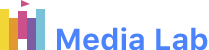
<style>
.page{position:relative;width:209px;height:50px;background:#ffffff}
.page>*{position:absolute;margin:0}
.t1{font:30px "SFUIText-Bold";color:#4a83fb}
</style>
<div class="page">
<p class="t1" style="left:57px;top:27px;width:151px;height:24px">Media Lab</p>
</div>
